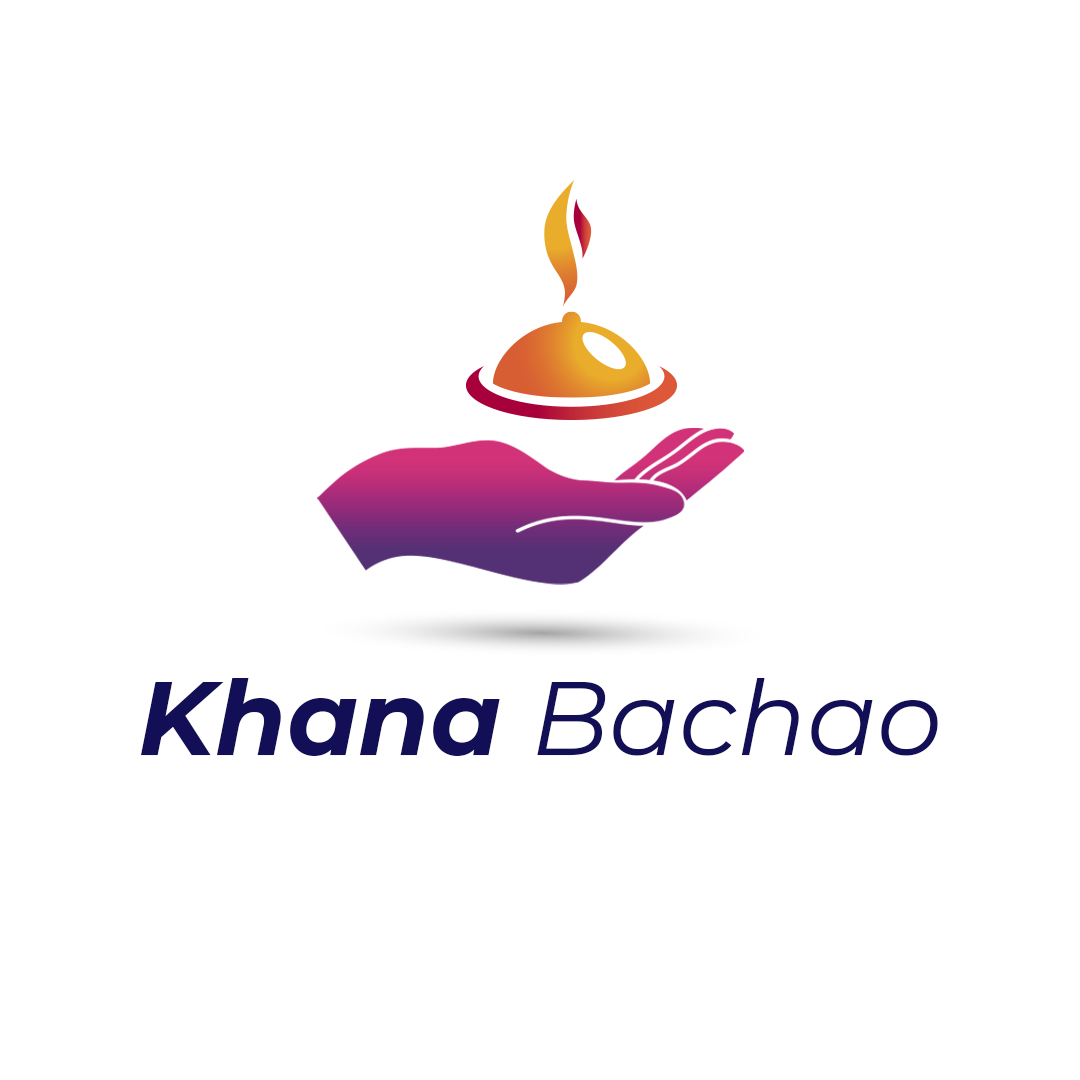
<style>
.page{position:relative;width:1080px;height:1080px;background:#ffffff}
.page>*{position:absolute;margin:0}
.t1{font:103.5px "Montserrat-Italic";color:#120f56}
.t2{font:103.5px "Montserrat-BoldItalic";color:#120f56}
</style>
<div class="page">
<p class="t1" style="left:141px;top:678px;width:797px;height:78px"><span class="t2">Khana </span>Bachao</p>
</div>
